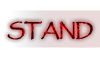
<style>
.page{position:relative;width:100px;height:60px;background:#ffffff}
.page>*{position:absolute;margin:0}
.t1{font:18px "Papyrus-Regular";letter-spacing:-0.04em;font-weight:bold}
</style>
<div class="page">
<p class="t1" style="left:7px;top:21px;width:86px;height:19px">STAND</p>
</div>
